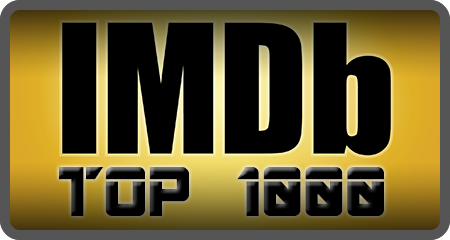
<style>
.page{position:relative;width:450px;height:240px;background:#000000}
.page>*{position:absolute;margin:0}
.t1{font:78px "ARDESTINE";color:#000000}
</style>
<div class="page">
<p class="t1" style="left:59px;top:167px;width:325px;height:49px">TOP 1000</p>
</div>
